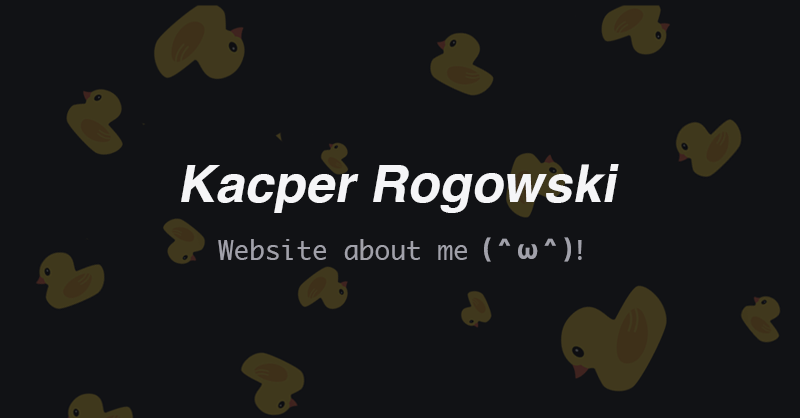
<style>
.page{position:relative;width:800px;height:418px;background:#111215}
.page>*{position:absolute;margin:0}
.t1{font:52.2px "Helvetica-Bold";color:#f5f5f7;font-style:italic}
.t2{font:26.1px "Monaco";color:#a1a1aa}
.t3{font:26.1px "BMDoHyeon-OTF";color:#a1a1aa}
</style>
<div class="page">
<p class="t1" style="left:181px;top:164px;width:438px;height:49px">Kacper Rogowski</p>
<p class="t2" style="left:218px;top:239px;width:249px;height:21px">Website about me</p>
<p class="t3" style="left:484px;top:237px;width:87px;height:25px">（＾ω＾）</p>
<p class="t2" style="left:578px;top:240px;width:4px;height:20px">!</p>
</div>
